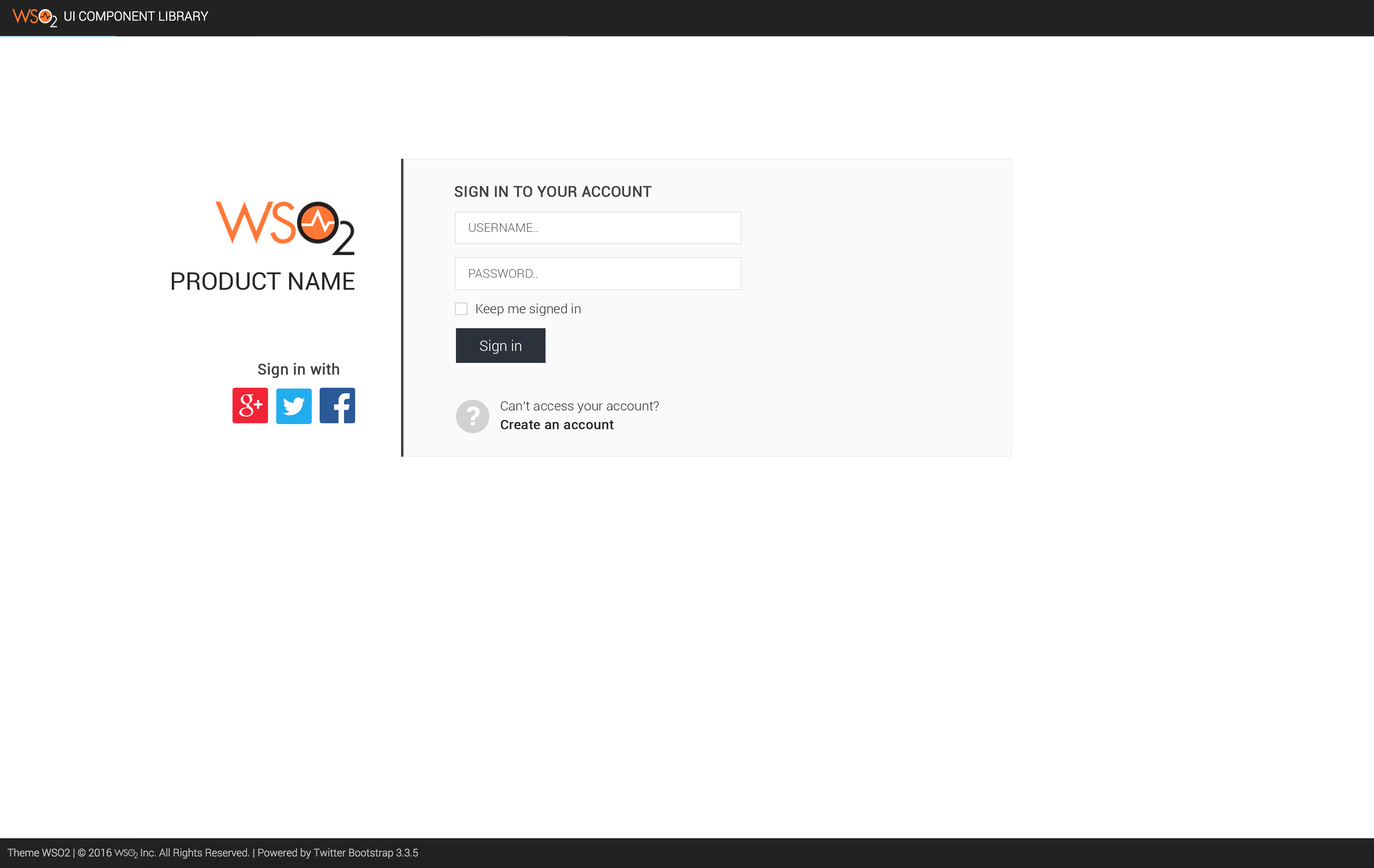
<style>
.page{position:relative;width:1374px;height:868px;background:#ffffff}
.page>*{position:absolute;margin:0}
.t1{font:14.9px "Roboto-Regular";color:#414141;text-transform:uppercase;font-weight:bold}
.t2{font:12.4px "Roboto-Light";color:#5f5e5e;text-transform:uppercase}
.t3{font:24.7px "Roboto-Regular";color:#282828;text-transform:uppercase}
.t4{font:13.2px "Roboto-Light";color:#222222}
.t5{font:14.5px "Roboto-Light";color:#ffffff}
.t6{font:14.9px "Roboto-Regular";color:#414141;font-weight:bold}
.t7{font:26px "Roboto-Black";color:#ffffff;text-transform:uppercase}
.t8{font:13.2px "Roboto-Regular";color:#252525;font-weight:bold}
</style>
<div class="page">
<p class="t1" style="left:455px;top:186px;width:197px;height:11px">Sign in to your account</p>
<p class="t2" style="left:469px;top:223px;width:69px;height:9px">Username..</p>
<p class="t2" style="left:469px;top:269px;width:69px;height:9px">Password..</p>
<p class="t3" style="left:172px;top:272px;width:183px;height:18px">Product Name</p>
<p class="t4" style="left:476px;top:303px;width:105px;height:13px">Keep me signed in</p>
<p class="t5" style="left:480px;top:340px;width:41px;height:14px">Sign in</p>
<p class="t6" style="left:258px;top:363px;width:81px;height:15px">Sign in with</p>
<p class="t4" style="left:501px;top:401px;width:158px;height:12px">Can’t access your account?</p>
<p class="t7" style="left:467px;top:406px;width:13px;height:19px">?</p>
<p class="t8" style="left:501px;top:420px;width:113px;height:9px">Create an account</p>
</div>
